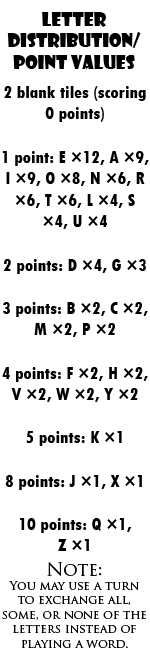
<style>
.page{position:relative;width:150px;height:658px;background:#ffffff}
.page>*{position:absolute;margin:0}
.t1{font:18px "ShowcardGothic-Reg";color:#000000}
.t2{font:18px "TwCenMT-CondensedExtraBold";color:#000000}
.t3{font:12px "TrajanPro-Regular";color:#000000}
.t4{font:18px "TrajanPro-Regular";color:#000000}
</style>
<div class="page">
<p class="t1" style="left:7px;top:12px;width:134px;height:57px;text-align:center">Letter Distribution/<br>Point Values</p>
<p class="t2" style="left:2px;top:86px;width:147px;height:465px;text-align:center">2 blank tiles (scoring 0 points)<br><br>1 point: E ×12, A ×9, I ×9, O ×8, N ×6, R ×6, T ×6, L ×4, S ×4, U ×4<br><br>2 points: D ×4, G ×3<br><br>3 points: B ×2, C ×2, M ×2, P ×2<br><br>4 points: F ×2, H ×2, V ×2, W ×2, Y ×2<br><br>5 points: K ×1<br><br>8 points: J ×1, X ×1<br><br>10 points: Q ×1, <br>Z ×1</p>
<p class="t3" style="left:2px;top:562px;width:144px;height:86px;text-align:center"><span class="t4">Note:<br></span>You may use a turn to exchange all, some, or none of the letters instead of playing a word.</p>
</div>
